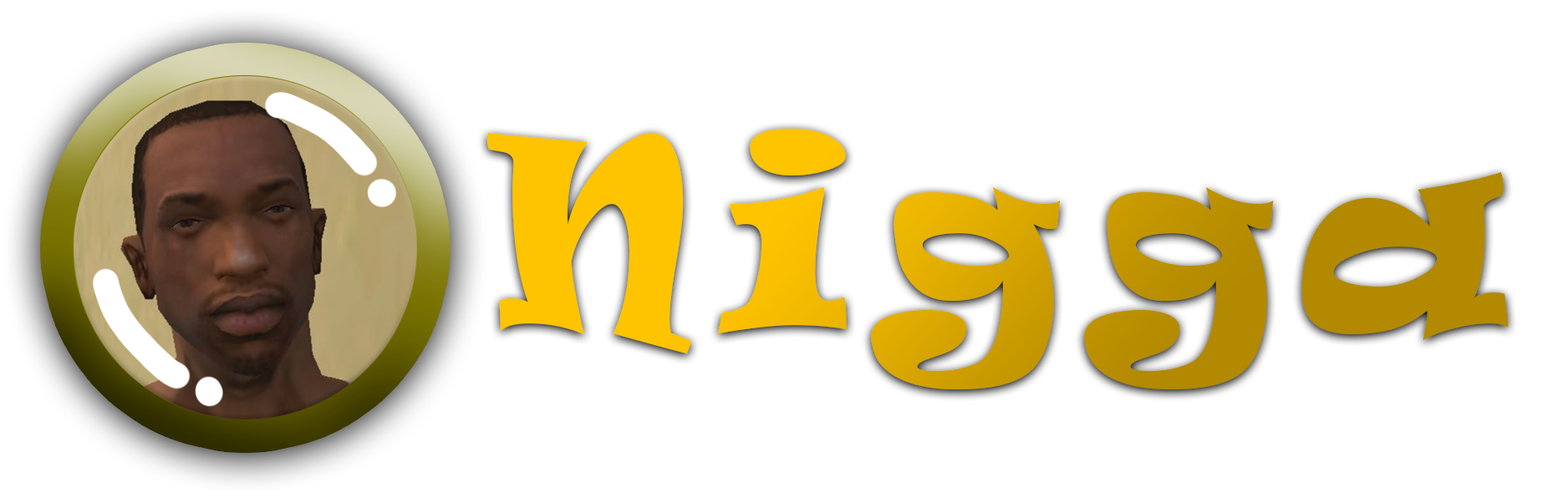
<style>
.page{position:relative;width:1568px;height:498px;background:#ffffff}
.page>*{position:absolute;margin:0}
.t1{font:250.7px "Ravie";letter-spacing:0.1em}
</style>
<div class="page">
<p class="t1" style="left:486px;top:129px;width:1023px;height:260px">Nigga</p>
</div>
